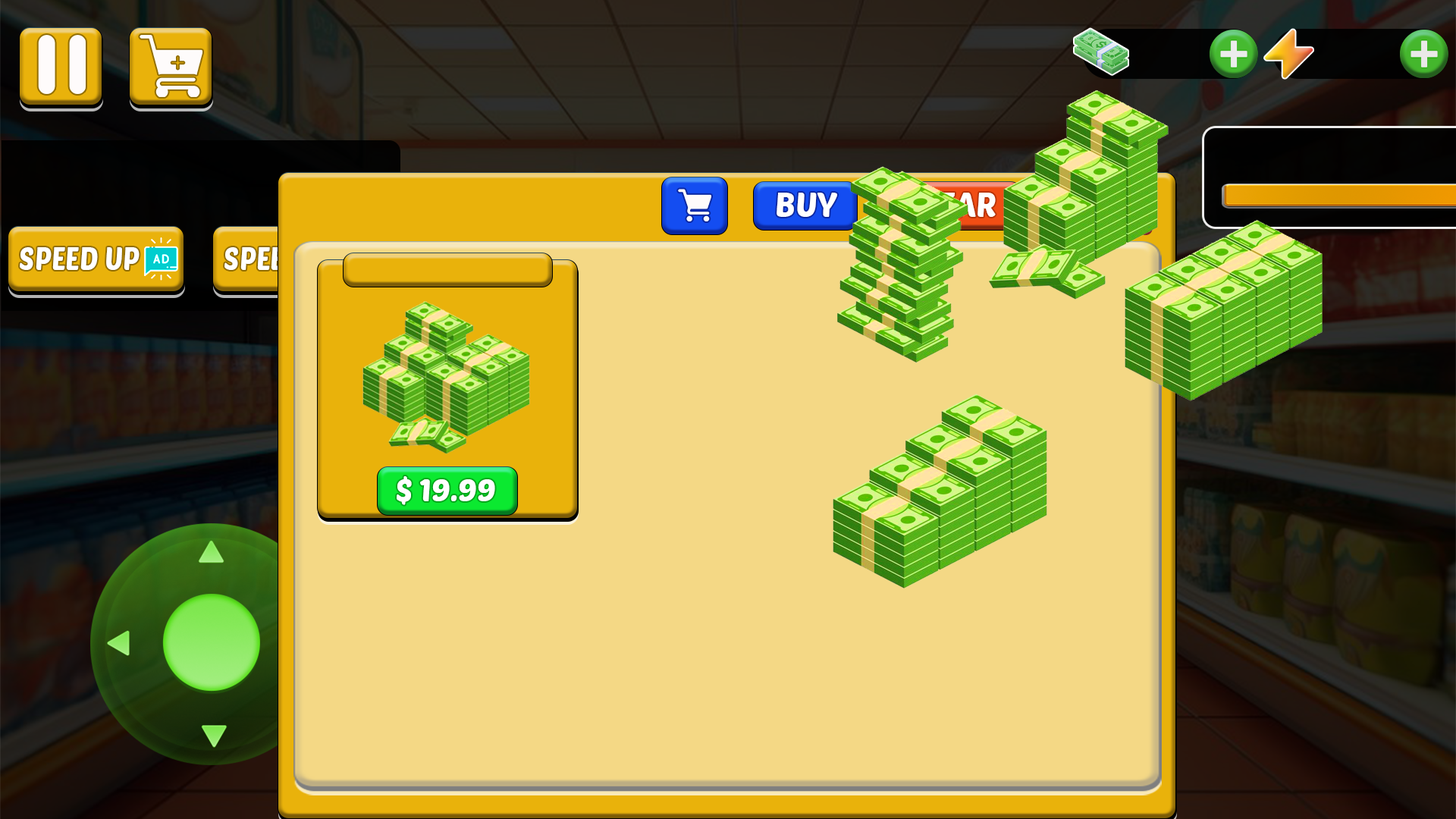
<style>
.page{position:relative;width:1456px;height:819px;background:#f4d885}
.page>*{position:absolute;margin:0}
.t1{font:33px "PoetsenOne-Regular";color:#ffffff}
.t2{font:33px "PoetsenOne-Regular"}
.t3{font:31.4px "PoetsenOne-Regular";color:#ffffff}
</style>
<div class="page">
<p class="t1" style="left:777px;top:193px;width:60px;height:24px">BUY</p>
<p class="t2" style="left:904px;top:193px;width:92px;height:24px">CLEAR</p>
<p class="t3" style="left:397px;top:476px;width:98px;height:29px">$ 19.99</p>
</div>
